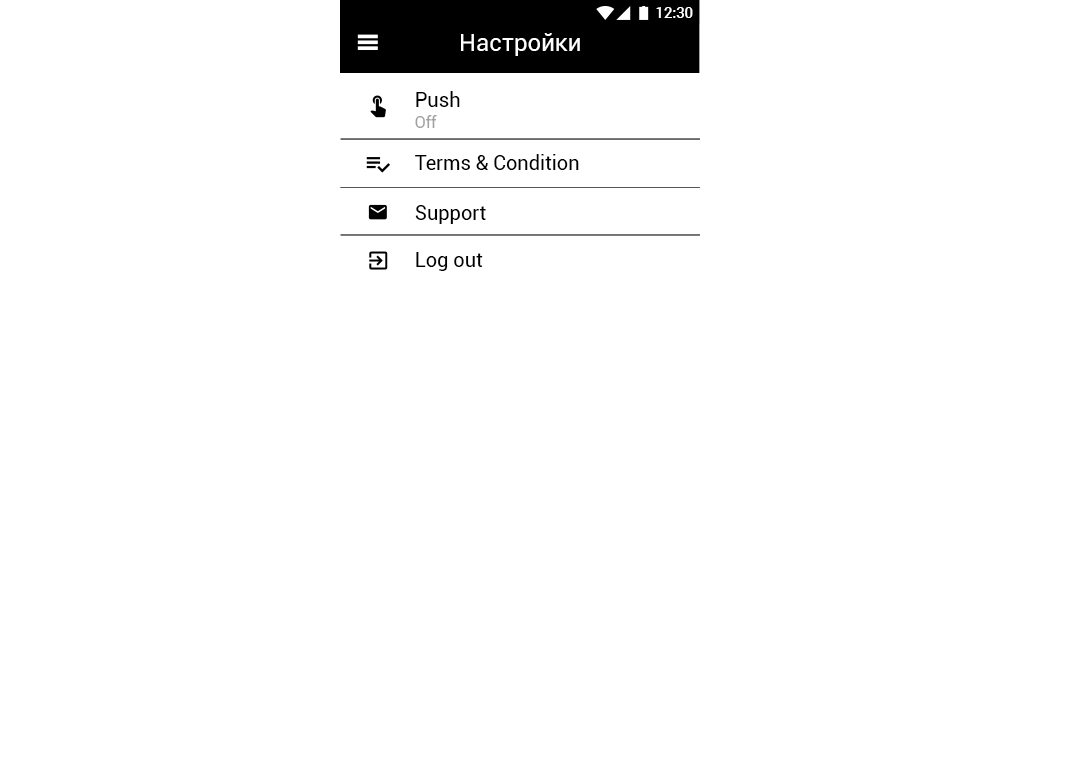
<style>
.page{position:relative;width:1080px;height:768px;background:#ffffff}
.page>*{position:absolute;margin:0}
.t1{font:14.6px "Roboto-Medium";color:#ffffff}
.t2{font:24px "Roboto-Regular";color:#ffffff}
.t3{font:20px "Roboto-Regular";color:#000000}
.t4{font:16px "Roboto-Regular";color:#a1a1a1}
</style>
<div class="page">
<p class="t1" style="left:656px;top:7px;width:37px;height:11px">12:30</p>
<p class="t2" style="left:461px;top:33px;width:119px;height:23px">Настройки</p>
<p class="t3" style="left:416px;top:91px;width:44px;height:16px">Push</p>
<p class="t4" style="left:415px;top:115px;width:22px;height:13px">Off</p>
<p class="t3" style="left:415px;top:154px;width:164px;height:16px">Terms &amp; Condition</p>
<p class="t3" style="left:415px;top:205px;width:71px;height:19px">Support</p>
<p class="t3" style="left:416px;top:252px;width:67px;height:19px">Log out</p>
</div>
